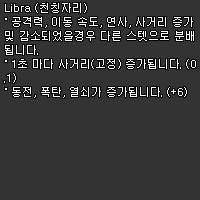
<style>
.page{position:relative;width:200px;height:200px;background:#333333}
.page>*{position:absolute;margin:0}
.t1{font:11px/14px "Dotum";color:#ffffff}
</style>
<div class="page">
<p class="t1" style="left:4px;top:3px;width:192px;height:95px">Libra (천칭자리)<br>˚ 공격력, 이동 속도, 연사, 사거리 증가<br>및 감소되었을경우 다른 스텟으로 분배<br>됩니다.<br>˚ 1초 마다 사거리(고정) 증가됩니다. (0<br>.1)<br>˚ 동전, 폭탄, 열쇠가 증가됩니다. (+6)</p>
</div>
